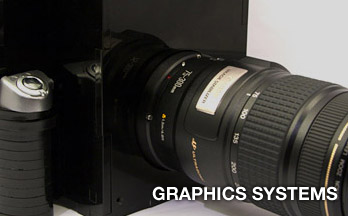
<style>
.page{position:relative;width:348px;height:216px}
.page>*{position:absolute;margin:0}
.t1{font:18px "HelveticaNeue-Bold";color:#ffffff}
</style>
<div class="page">
<p class="t1" style="left:152px;top:186px;width:186px;height:15px">GRAPHICS SYSTEMS</p>
</div>
